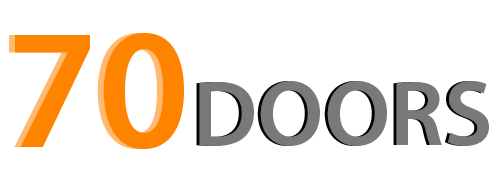
<style>
.page{position:relative;width:500px;height:189px;background:#ffffff}
.page>*{position:absolute;margin:0}
.t1{font:171.8px "MyriadPro-Semibold";color:#fe8400}
.t2{font:93.6px "MyriadPro-Semibold";color:#77797a}
</style>
<div class="page">
<p class="t1" style="left:9px;top:32px;width:169px;height:118px">70</p>
<p class="t1" style="left:15px;top:32px;width:169px;height:118px">70</p>
<p class="t2" style="left:196px;top:81px;width:290px;height:65px">DOORS</p>
<p class="t2" style="left:199px;top:81px;width:290px;height:65px">DOORS</p>
</div>
